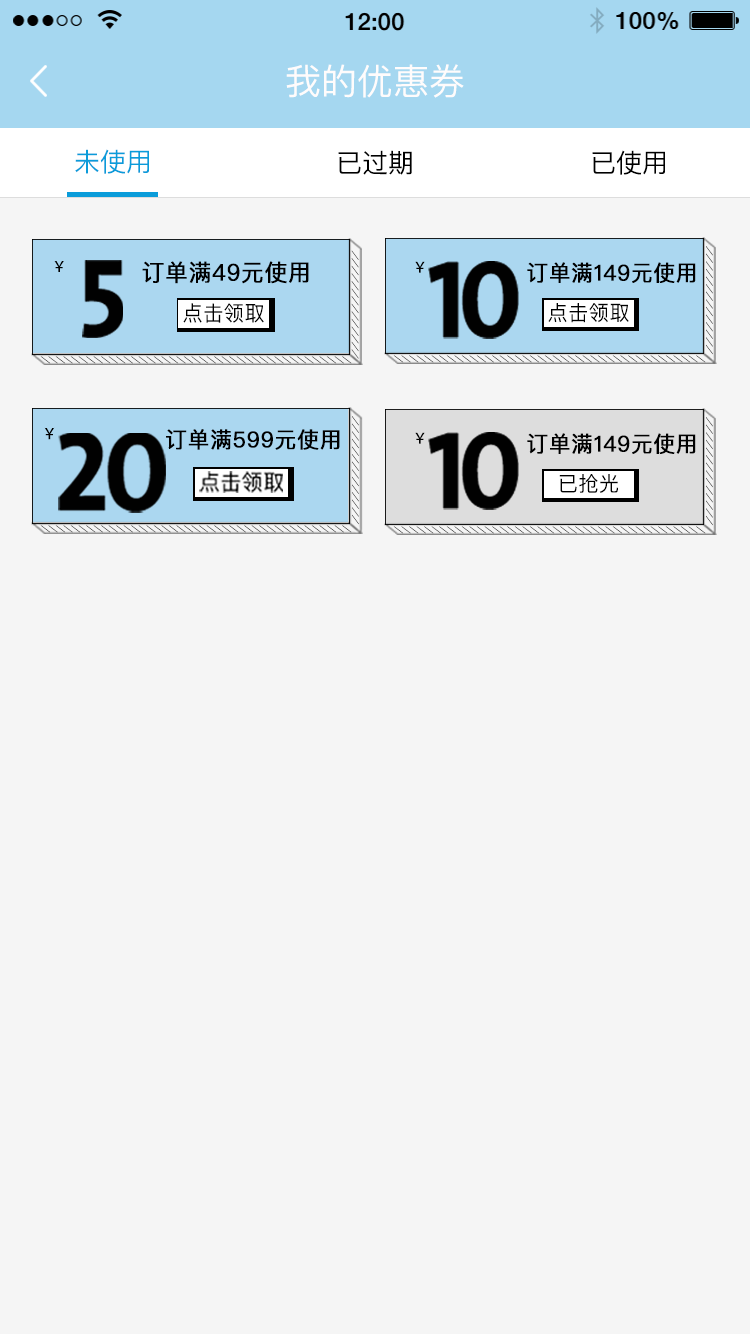
<style>
.page{position:relative;width:750px;height:1334px;background:#f5f5f5}
.page>*{position:absolute;margin:0}
.t1{font:36px "PingFangSC-Regular";color:#fffcfc}
.t2{font:26px "PingFangSC-Regular";color:#0a9cda}
.t3{font:26px "PingFangSC-Regular";color:#000000}
.t4{font:12.9px "ArialMT";letter-spacing:0.27em;text-transform:uppercase;scale:1.08 1}
.t5{font:14.8px "AdobeHeitiStd-Regular";letter-spacing:0.03em;color:#000000;text-transform:uppercase}
.t6{font:112.2px "TheSansBold-Caps";letter-spacing:-0.19em;color:#010101;text-transform:uppercase;font-weight:bold;scale:0.96 1}
.t7{font:23.2px "PingFangSC-Regular";letter-spacing:0.03em;color:#000000;text-transform:uppercase;font-weight:bold;scale:0.96 1}
.t8{font:14.6px "AdobeHeitiStd-Regular";letter-spacing:0.03em;color:#000000;text-transform:uppercase}
.t9{font:110.4px "TheSansBold-Caps";letter-spacing:-0.09em;color:#010101;text-transform:uppercase;font-weight:bold;scale:0.97 1}
.t10{font:22px "PingFangSC-Regular";letter-spacing:0.03em;color:#000000;text-transform:uppercase;font-weight:bold;scale:0.96 1}
.t11{font:21.1px "PingFangSC-Regular";letter-spacing:0.03em;color:#000000;text-transform:uppercase;scale:0.95 1}
.t12{font:20.9px "PingFangSC-Regular";letter-spacing:0.03em;color:#000000;text-transform:uppercase;scale:0.96 1}
.t13{font:12.9px "ArialMT";letter-spacing:0.27em;text-transform:uppercase;scale:1.07 1}
.t14{font:15.1px "AdobeHeitiStd-Regular";letter-spacing:0.03em;color:#000000;text-transform:uppercase}
.t15{font:114.3px "TheSansBold-Caps";letter-spacing:-0.07em;color:#010101;text-transform:uppercase;font-weight:bold}
.t16{font:22px "PingFangSC-Regular";letter-spacing:0.03em;color:#000000;text-transform:uppercase;font-weight:bold;scale:0.97 1}
.t17{font:21.6px "PingFang-SC-Medium";letter-spacing:0.03em;color:#000000;text-transform:uppercase;scale:0.96 1}
</style>
<div class="page">
<p class="t1" style="left:286px;top:64px;width:178px;height:34px">我的优惠券</p>
<p class="t2" style="left:75px;top:149px;width:74px;height:25px">未使用</p>
<p class="t3" style="left:338px;top:150px;width:74px;height:25px">已过期</p>
<p class="t3" style="left:592px;top:150px;width:73px;height:25px">已使用</p>
<p class="t4" style="left:706px;top:246px;width:7px;height:109px;rotate:90deg">//////////////</p>
<p class="t4" style="left:351px;top:250px;width:8px;height:109px;rotate:90deg">//////////////</p>
<p class="t5" style="left:54px;top:261px;width:10px;height:11px">￥</p>
<p class="t6" style="left:82px;top:260px;width:41px;height:78px">5</p>
<p class="t7" style="left:142px;top:261px;width:167px;height:23px">订单满49元使用</p>
<p class="t8" style="left:415px;top:261px;width:10px;height:12px">￥</p>
<p class="t9" style="left:428px;top:261px;width:91px;height:78px">10</p>
<p class="t10" style="left:527px;top:262px;width:169px;height:21px">订单满149元使用</p>
<p class="t11" style="left:183px;top:303px;width:81px;height:20px">点击领取</p>
<p class="t12" style="left:548px;top:303px;width:81px;height:20px">点击领取</p>
<p class="t13" style="left:40px;top:356px;width:312px;height:8px;rotate:180deg">/////////////////////////////////////////</p>
<p class="t13" style="left:393px;top:355px;width:313px;height:8px;rotate:180deg">/////////////////////////////////////////</p>
<p class="t4" style="left:352px;top:416px;width:7px;height:109px;rotate:90deg">//////////////</p>
<p class="t4" style="left:706px;top:417px;width:7px;height:109px;rotate:90deg">//////////////</p>
<p class="t14" style="left:44px;top:427px;width:11px;height:13px">￥</p>
<p class="t15" style="left:58px;top:433px;width:108px;height:80px">20</p>
<p class="t16" style="left:166px;top:429px;width:174px;height:21px">订单满599元使用</p>
<p class="t8" style="left:415px;top:432px;width:10px;height:12px">￥</p>
<p class="t9" style="left:428px;top:432px;width:91px;height:78px">10</p>
<p class="t10" style="left:527px;top:433px;width:169px;height:21px">订单满149元使用</p>
<p class="t17" style="left:199px;top:471px;width:84px;height:22px">点击领取</p>
<p class="t12" style="left:559px;top:474px;width:59px;height:19px">已抢光</p>
<p class="t13" style="left:40px;top:525px;width:312px;height:8px;rotate:180deg">/////////////////////////////////////////</p>
<p class="t13" style="left:393px;top:526px;width:313px;height:8px;rotate:180deg">/////////////////////////////////////////</p>
</div>
